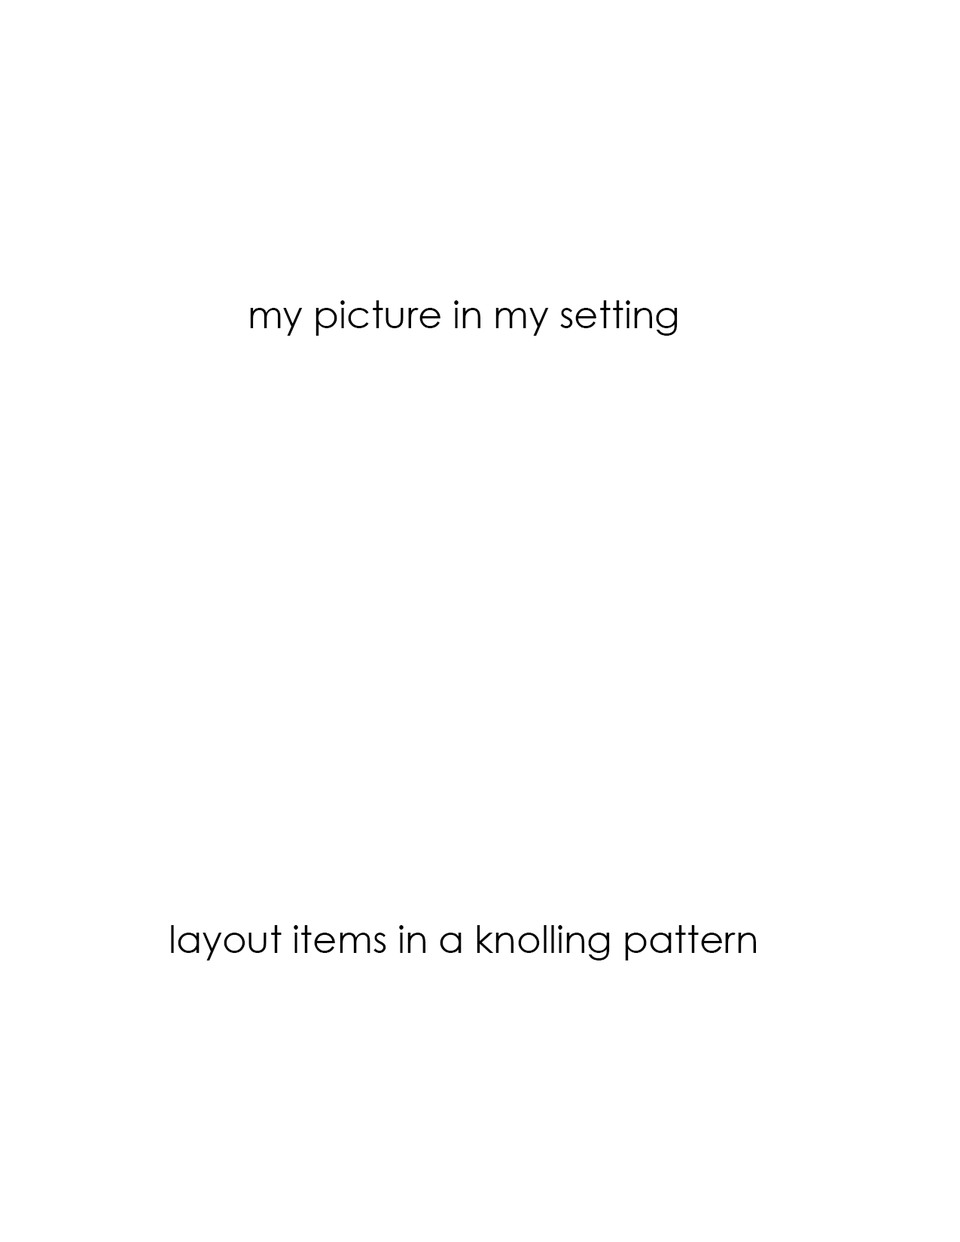
<style>
.page{position:relative;width:960px;height:1242px;background:#ffffff}
.page>*{position:absolute;margin:0}
.t1{font:37.6px "CenturyGothic";color:#000000}
</style>
<div class="page">
<p class="t1" style="left:250px;top:300px;width:428px;height:36px">my picture in my setting</p>
<p class="t1" style="left:171px;top:925px;width:585px;height:36px">layout items in a knolling pattern</p>
</div>
